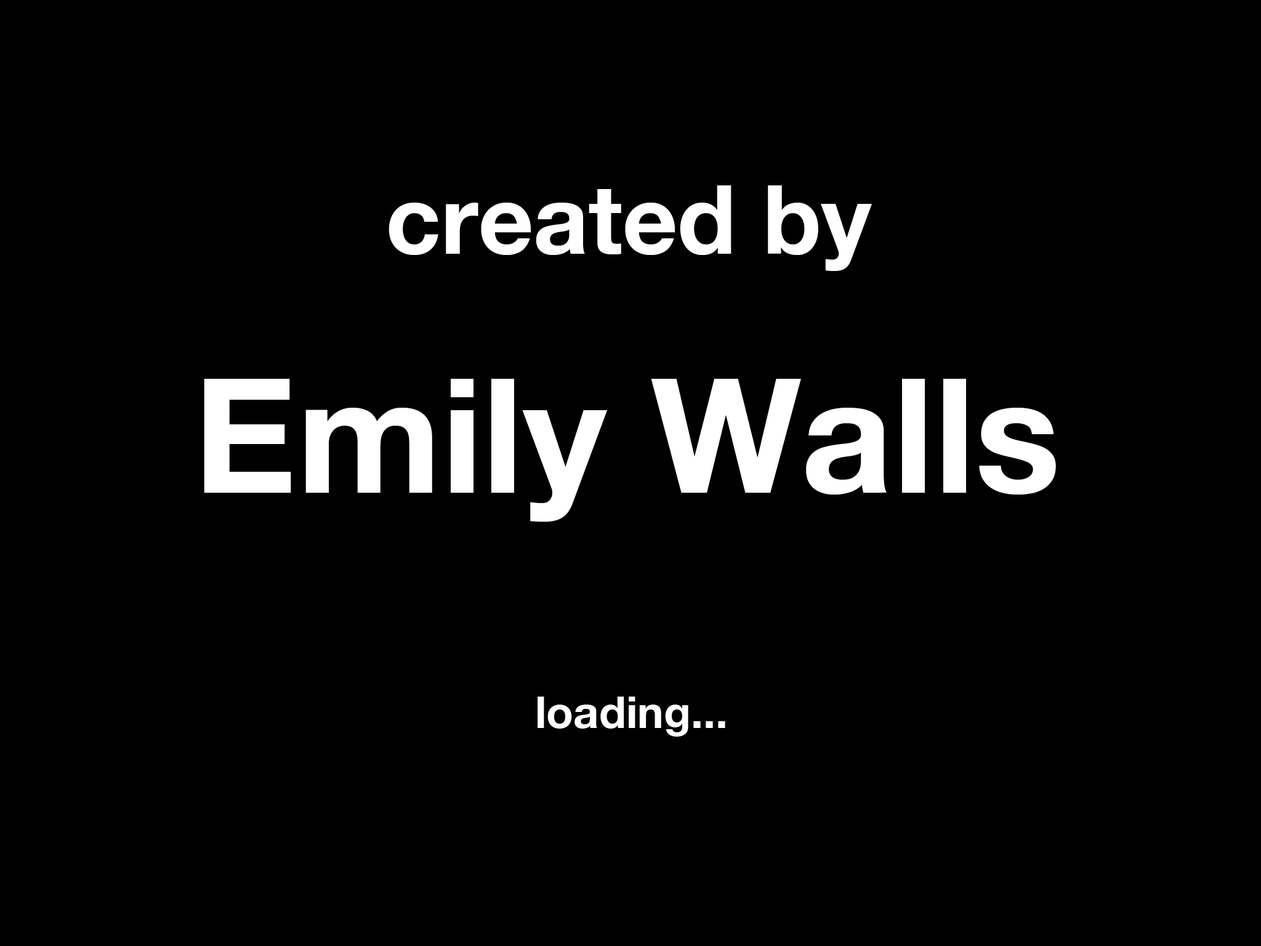
<style>
.page{position:relative;width:1261px;height:946px;background:#000000}
.page>*{position:absolute;margin:0}
.t1{font:96.1px "HelveticaNeue-Bold";color:#ffffff}
.t2{font:159.5px "HelveticaNeue-Bold";color:#ffffff}
.t3{font:44.3px "HelveticaNeue-Bold";color:#ffffff}
</style>
<div class="page">
<p class="t1" style="left:388px;top:185px;width:484px;height:86px">created by</p>
<p class="t2" style="left:204px;top:379px;width:852px;height:142px">Emily Walls</p>
<p class="t3" style="left:537px;top:696px;width:188px;height:40px">loading...</p>
</div>
